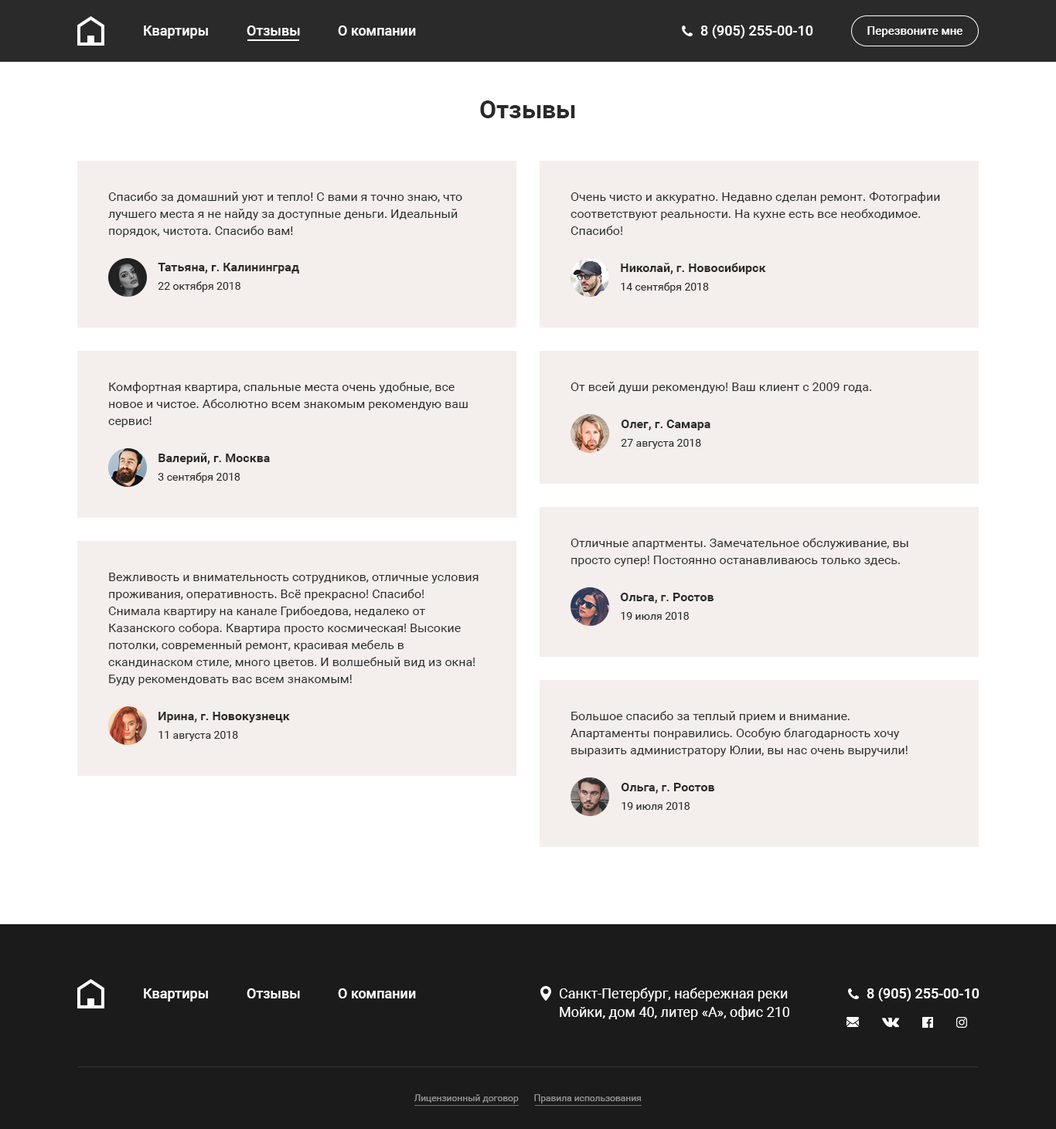
<style>
.page{position:relative;width:1056px;height:1129px;background:#f4efed}
.page>*{position:absolute;margin:0}
.t1{font:13.9px "Roboto-Medium";color:#ffffff}
.t2{font:11.6px "Roboto-Medium";color:#ffffff}
.t3{font:24.7px "Roboto-Bold";color:#2a2a2a}
.t4{font:12.4px/17px "Roboto-Regular";color:#2a2a2a}
.t5{font:12.4px "Roboto-Bold";color:#2a2a2a}
.t6{font:10.8px "Roboto-Regular";color:#2a2a2a}
.t7{font:12.4px "Roboto-Regular";color:#2a2a2a}
.t8{font:13.9px/18.6px "Roboto-Regular";color:#ffffff}
.t9{font:9.3px "Roboto-Regular";color:#939393}
</style>
<div class="page">
<p class="t1" style="left:144px;top:26px;width:64px;height:13px">Квартиры</p>
<p class="t1" style="left:247px;top:26px;width:53px;height:10px">Отзывы</p>
<p class="t1" style="left:338px;top:26px;width:78px;height:10px">О компании</p>
<p class="t1" style="left:700px;top:25px;width:113px;height:14px">8 (905) 255-00-10</p>
<p class="t2" style="left:867px;top:26px;width:95px;height:11px">Перезвоните мне</p>
<p class="t3" style="left:480px;top:100px;width:95px;height:18px">Отзывы</p>
<p class="t4" style="left:108px;top:192px;width:354px;height:45px">Спасибо за домашний уют и тепло! С вами я точно знаю, что лучшего места я не найду за доступные деньги. Идеальный порядок, чистота. Спасибо вам!</p>
<p class="t4" style="left:570px;top:192px;width:370px;height:43px">Очень чисто и аккуратно. Недавно сделан ремонт. Фотографии соответствуют реальности. На кухне есть все необходимое. Спасибо!</p>
<p class="t5" style="left:158px;top:263px;width:141px;height:11px">Татьяна, г. Калининград</p>
<p class="t5" style="left:621px;top:263px;width:145px;height:11px">Николай, г. Новосибирск</p>
<p class="t6" style="left:158px;top:281px;width:82px;height:11px">22 октября 2018</p>
<p class="t6" style="left:621px;top:282px;width:88px;height:11px">14 сентября 2018</p>
<p class="t4" style="left:108px;top:382px;width:360px;height:45px">Комфортная квартира, спальные места очень удобные, все новое и чистое. Абсолютно всем знакомым рекомендую ваш сервис!</p>
<p class="t7" style="left:570px;top:382px;width:301px;height:11px">От всей души рекомендую! Ваш клиент с 2009 года.</p>
<p class="t5" style="left:621px;top:420px;width:89px;height:11px">Олег, г. Самара</p>
<p class="t6" style="left:621px;top:439px;width:80px;height:10px">27 августа 2018</p>
<p class="t5" style="left:158px;top:453px;width:112px;height:12px">Валерий, г. Москва</p>
<p class="t6" style="left:158px;top:472px;width:82px;height:11px">3 сентября 2018</p>
<p class="t4" style="left:570px;top:538px;width:338px;height:29px">Отличные апартменты. Замечательное обслуживание, вы просто супер! Постоянно останавливаюсь только здесь.</p>
<p class="t4" style="left:108px;top:573px;width:370px;height:113px">Вежливость и внимательность сотрудников, отличные условия проживания, оперативность. Всё прекрасно! Спасибо!<br>Снимала квартиру на канале Грибоедова, недалеко от Казанского собора. Квартира просто космическая! Высокие потолки, современный ремонт, красивая мебель в скандинаском стиле, много цветов. И волшебный вид из окна!<br>Буду рекомендовать вас всем знакомым!</p>
<p class="t5" style="left:620px;top:593px;width:93px;height:11px">Ольга, г. Ростов</p>
<p class="t6" style="left:621px;top:612px;width:68px;height:8px">19 июля 2018</p>
<p class="t5" style="left:158px;top:712px;width:132px;height:11px">Ирина, г. Новокузнецк</p>
<p class="t4" style="left:570px;top:711px;width:337px;height:46px">Большое спасибо за теплый прием и внимание.<br>Апартаменты понравились. Особую благодарность хочу выразить администратору Юлии, вы нас очень выручили!</p>
<p class="t6" style="left:158px;top:731px;width:80px;height:10px">11 августа 2018</p>
<p class="t5" style="left:621px;top:783px;width:93px;height:11px">Ольга, г. Ростов</p>
<p class="t6" style="left:621px;top:802px;width:68px;height:8px">19 июля 2018</p>
<p class="t1" style="left:144px;top:989px;width:64px;height:13px">Квартиры</p>
<p class="t1" style="left:247px;top:989px;width:53px;height:10px">Отзывы</p>
<p class="t1" style="left:338px;top:989px;width:78px;height:10px">О компании</p>
<p class="t8" style="left:559px;top:988px;width:230px;height:32px">Санкт-Петербург, набережная реки <br>Мойки, дом 40, литер «А», офис 210</p>
<p class="t1" style="left:867px;top:988px;width:112px;height:14px">8 (905) 255-00-10</p>
<p class="t9" style="left:414px;top:1095px;width:105px;height:9px">Лицензионный договор</p>
<p class="t9" style="left:534px;top:1095px;width:107px;height:9px">Правила использования</p>
</div>
